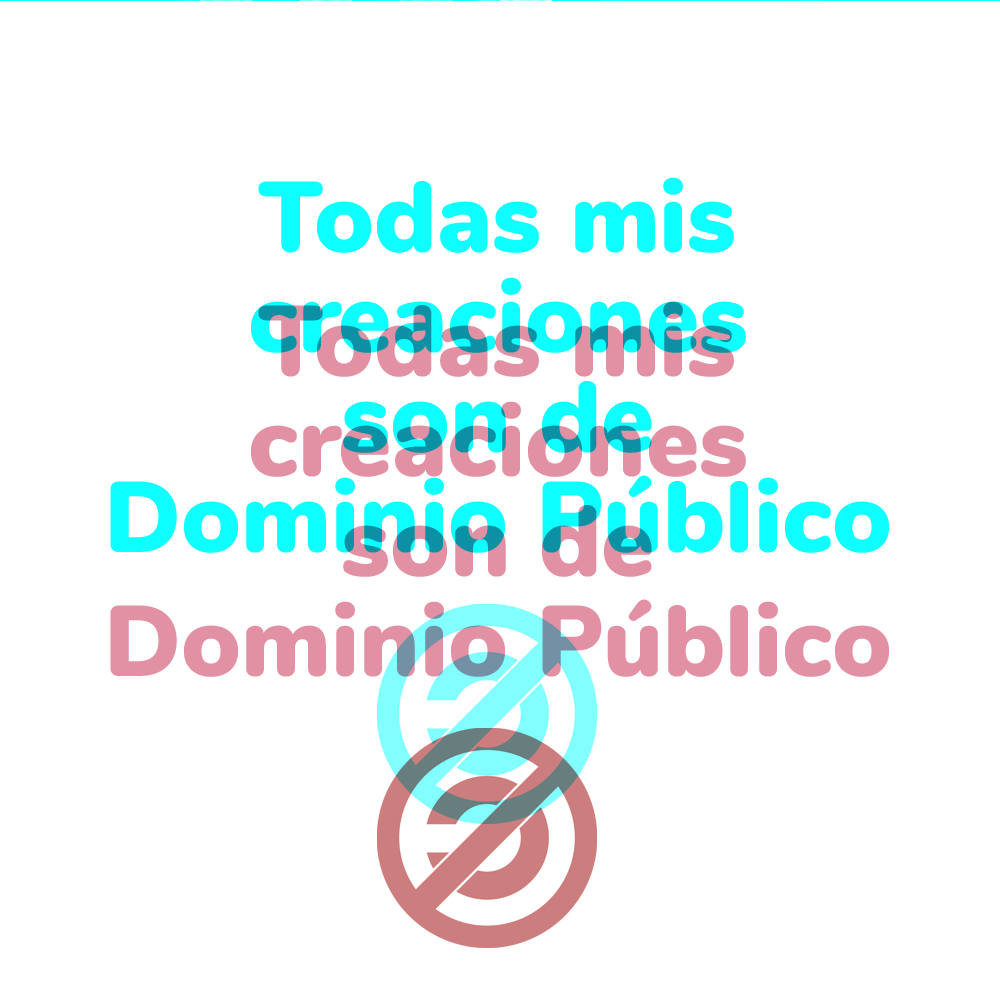
<style>
.page{position:relative;width:1000px;height:1000px;background:#ffffff}
.page>*{position:absolute;margin:0}
.t1{font:100px/100px "Nunito-Black";color:#0dffff}
</style>
<div class="page">
<p class="t1" style="left:110px;top:176px;width:779px;height:376px;text-align:center">Todas mis<br>creaciones<br>son de<br>Dominio Público</p>
</div>
